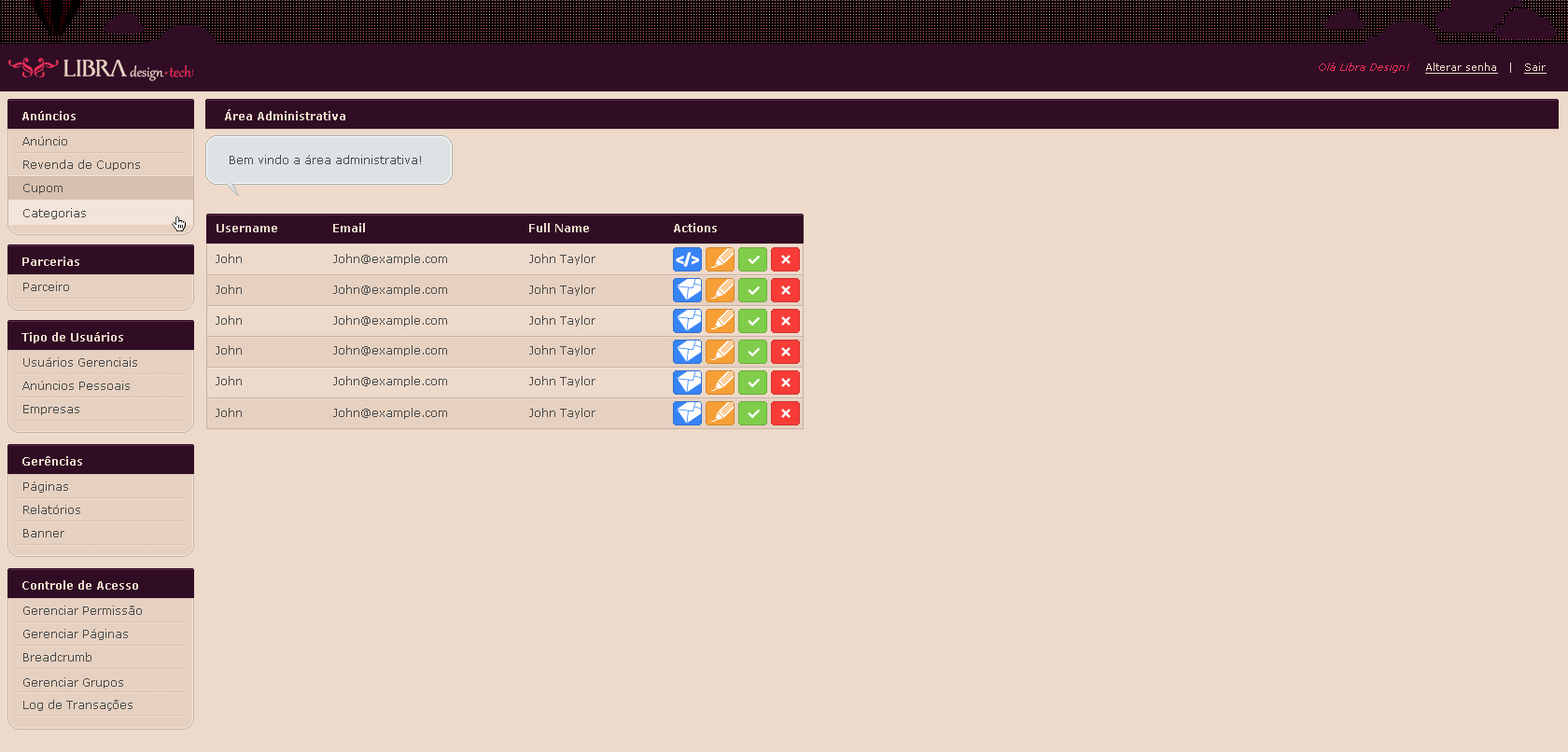
<style>
.page{position:relative;width:1568px;height:752px;background:#eedacb}
.page>*{position:absolute;margin:0}
.t1{font:10.3px "Verdana-Italic";color:#ed2f59}
.t2{font:10.3px "Verdana";color:#eedacb;text-decoration:underline}
.t3{font:10.3px "Verdana";color:#eedacb}
.t4{font:11.2px "Verdana-Bold";color:#eedacb}
.t5{font:11.2px "Verdana";color:#4a4a4a}
</style>
<div class="page">
<p class="t1" style="left:1319px;top:63px;width:228px;height:11px">Olá Libra Design!    <span class="t2">Alterar senha</span><span class="t3">   |   </span><span class="t2">Sair</span></p>
<p class="t4" style="left:22px;top:111px;width:54px;height:9px">Anúncios</p>
<p class="t4" style="left:225px;top:109px;width:120px;height:11px">Área Administrativa</p>
<p class="t5" style="left:22px;top:136px;width:45px;height:10px">Anúncio</p>
<p class="t5" style="left:23px;top:160px;width:117px;height:11px">Revenda de Cupons</p>
<p class="t5" style="left:230px;top:155px;width:191px;height:9px">Bem vindo a área administrativa!</p>
<p class="t5" style="left:23px;top:184px;width:40px;height:10px">Cupom</p>
<p class="t5" style="left:23px;top:208px;width:63px;height:11px">Categorias</p>
<p class="t4" style="left:217px;top:224px;width:60px;height:8px">Username</p>
<p class="t4" style="left:333px;top:223px;width:32px;height:9px">Email</p>
<p class="t4" style="left:529px;top:223px;width:60px;height:9px">Full Name</p>
<p class="t4" style="left:674px;top:223px;width:43px;height:9px">Actions</p>
<p class="t4" style="left:22px;top:257px;width:57px;height:9px">Parcerias</p>
<p class="t5" style="left:216px;top:254px;width:26px;height:9px">John</p>
<p class="t5" style="left:333px;top:254px;width:114px;height:11px">John@example.com</p>
<p class="t5" style="left:529px;top:254px;width:66px;height:11px">John Taylor</p>
<p class="t5" style="left:23px;top:282px;width:46px;height:9px">Parceiro</p>
<p class="t5" style="left:216px;top:285px;width:26px;height:9px">John</p>
<p class="t5" style="left:333px;top:285px;width:114px;height:11px">John@example.com</p>
<p class="t5" style="left:529px;top:285px;width:66px;height:11px">John Taylor</p>
<p class="t5" style="left:216px;top:315px;width:26px;height:10px">John</p>
<p class="t5" style="left:333px;top:315px;width:114px;height:12px">John@example.com</p>
<p class="t5" style="left:529px;top:315px;width:66px;height:12px">John Taylor</p>
<p class="t4" style="left:21px;top:332px;width:102px;height:11px">Tipo de Usuários</p>
<p class="t5" style="left:216px;top:345px;width:26px;height:10px">John</p>
<p class="t5" style="left:333px;top:345px;width:114px;height:12px">John@example.com</p>
<p class="t5" style="left:529px;top:345px;width:66px;height:12px">John Taylor</p>
<p class="t5" style="left:23px;top:357px;width:114px;height:10px">Usuários Gerenciais</p>
<p class="t5" style="left:216px;top:376px;width:26px;height:9px">John</p>
<p class="t5" style="left:333px;top:376px;width:114px;height:11px">John@example.com</p>
<p class="t5" style="left:529px;top:376px;width:66px;height:11px">John Taylor</p>
<p class="t5" style="left:22px;top:381px;width:108px;height:9px">Anúncios Pessoais</p>
<p class="t5" style="left:23px;top:405px;width:56px;height:10px">Empresas</p>
<p class="t5" style="left:216px;top:408px;width:26px;height:9px">John</p>
<p class="t5" style="left:333px;top:408px;width:114px;height:11px">John@example.com</p>
<p class="t5" style="left:529px;top:408px;width:66px;height:11px">John Taylor</p>
<p class="t4" style="left:22px;top:456px;width:60px;height:10px">Gerências</p>
<p class="t5" style="left:23px;top:482px;width:45px;height:11px">Páginas</p>
<p class="t5" style="left:23px;top:505px;width:57px;height:9px">Relatórios</p>
<p class="t5" style="left:23px;top:529px;width:41px;height:9px">Banner</p>
<p class="t4" style="left:22px;top:581px;width:116px;height:9px">Controle de Acesso</p>
<p class="t5" style="left:23px;top:606px;width:119px;height:9px">Gerenciar Permissão</p>
<p class="t5" style="left:23px;top:629px;width:105px;height:11px">Gerenciar Páginas</p>
<p class="t5" style="left:23px;top:652px;width:68px;height:10px">Breadcrumb</p>
<p class="t5" style="left:23px;top:678px;width:100px;height:11px">Gerenciar Grupos</p>
<p class="t5" style="left:23px;top:700px;width:110px;height:11px">Log de Transações</p>
</div>
